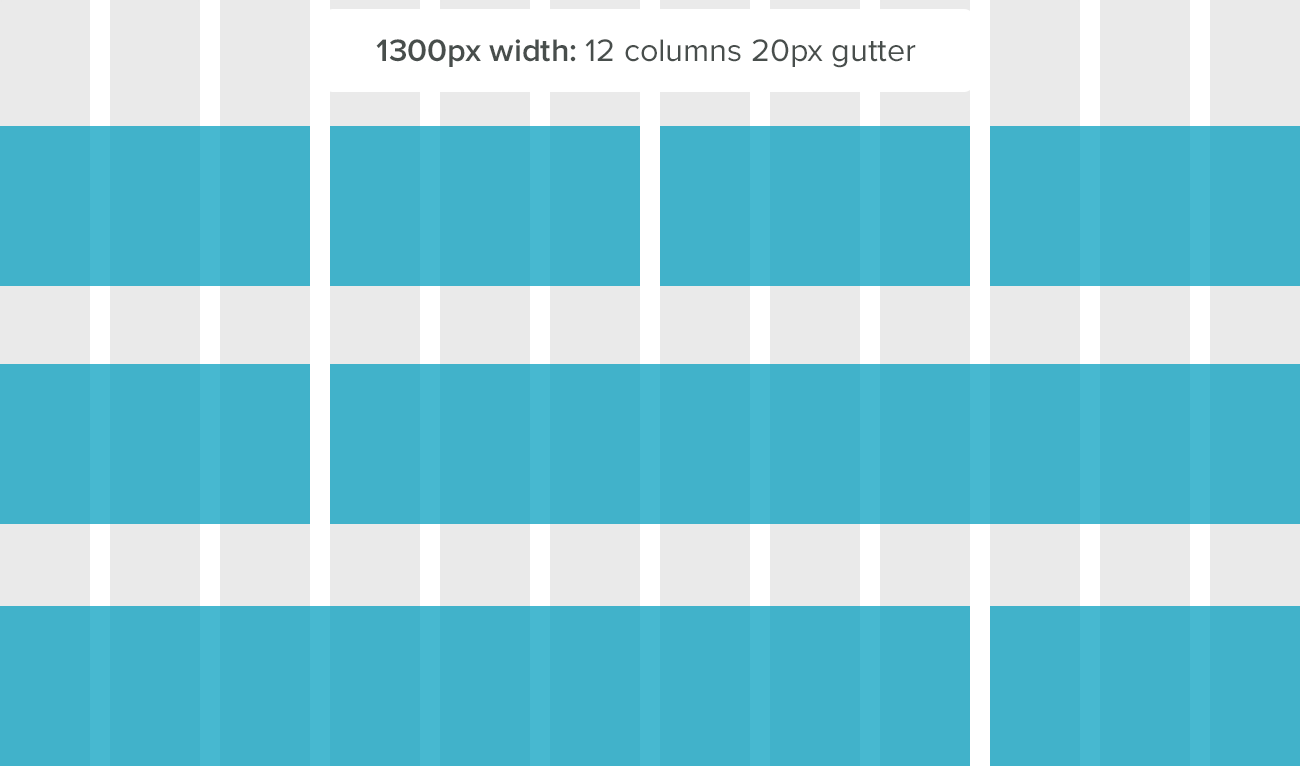
<style>
.page{position:relative;width:1300px;height:766px;background:#41b2ca}
.page>*{position:absolute;margin:0}
.t1{font:32.4px "ProximaNova-Regular";color:#484e4c}
.t2{font:32.4px "ProximaNova-Semibold";color:#484e4c}
</style>
<div class="page">
<p class="t1" style="left:376px;top:39px;width:540px;height:29px"><span class="t2">1300px width: </span>12 columns 20px gutter</p>
</div>
